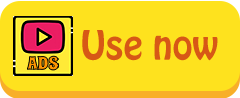
<style>
.page{position:relative;width:240px;height:98px;background:#fee21e}
.page>*{position:absolute;margin:0}
.t1{font:35.7px "HoboStd";color:#d75816}
</style>
<div class="page">
<p class="t1" style="left:82px;top:30px;width:136px;height:31px">Use now</p>
</div>
